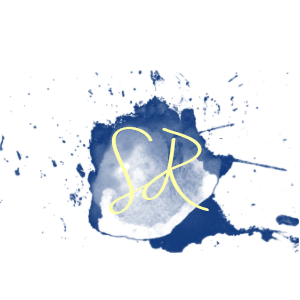
<style>
.page{position:relative;width:300px;height:300px;background:#ffffff}
.page>*{position:absolute;margin:0}
.t1{font:77.9px "NellaSueDemo";color:#fcffa7}
</style>
<div class="page">
<p class="t1" style="left:109px;top:127px;width:100px;height:87px">SR</p>
</div>
